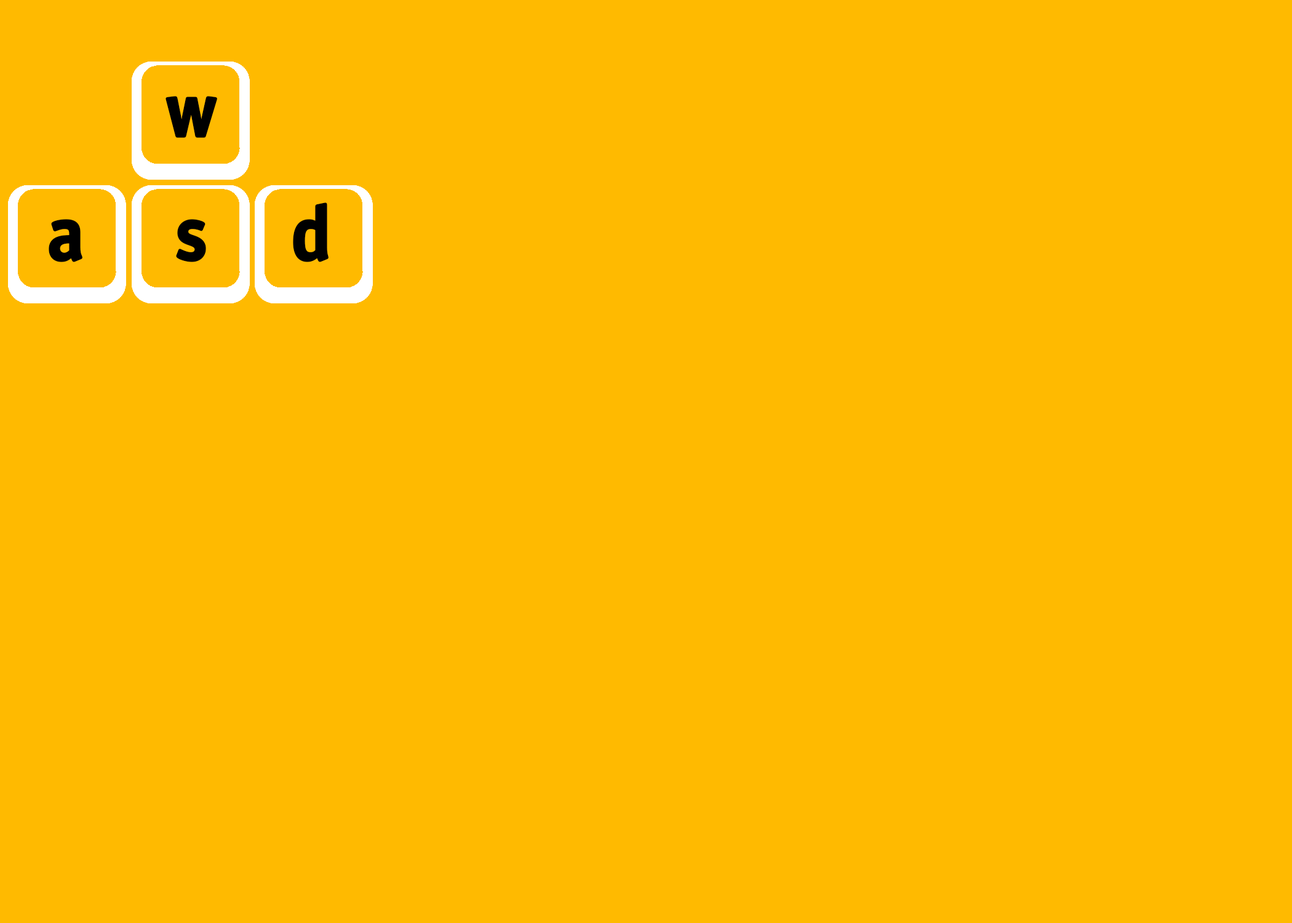
<style>
.page{position:relative;width:1292px;height:923px;background:#ffba00}
.page>*{position:absolute;margin:0}
.t1{font:76.9px "OfficinaSansStd-Bold";color:#000000;font-weight:bold}
</style>
<div class="page">
<p class="t1" style="left:166px;top:96px;width:51px;height:42px">w</p>
<p class="t1" style="left:293px;top:202px;width:36px;height:60px">d</p>
<p class="t1" style="left:49px;top:219px;width:33px;height:43px">a</p>
<p class="t1" style="left:176px;top:219px;width:30px;height:43px">s</p>
</div>
